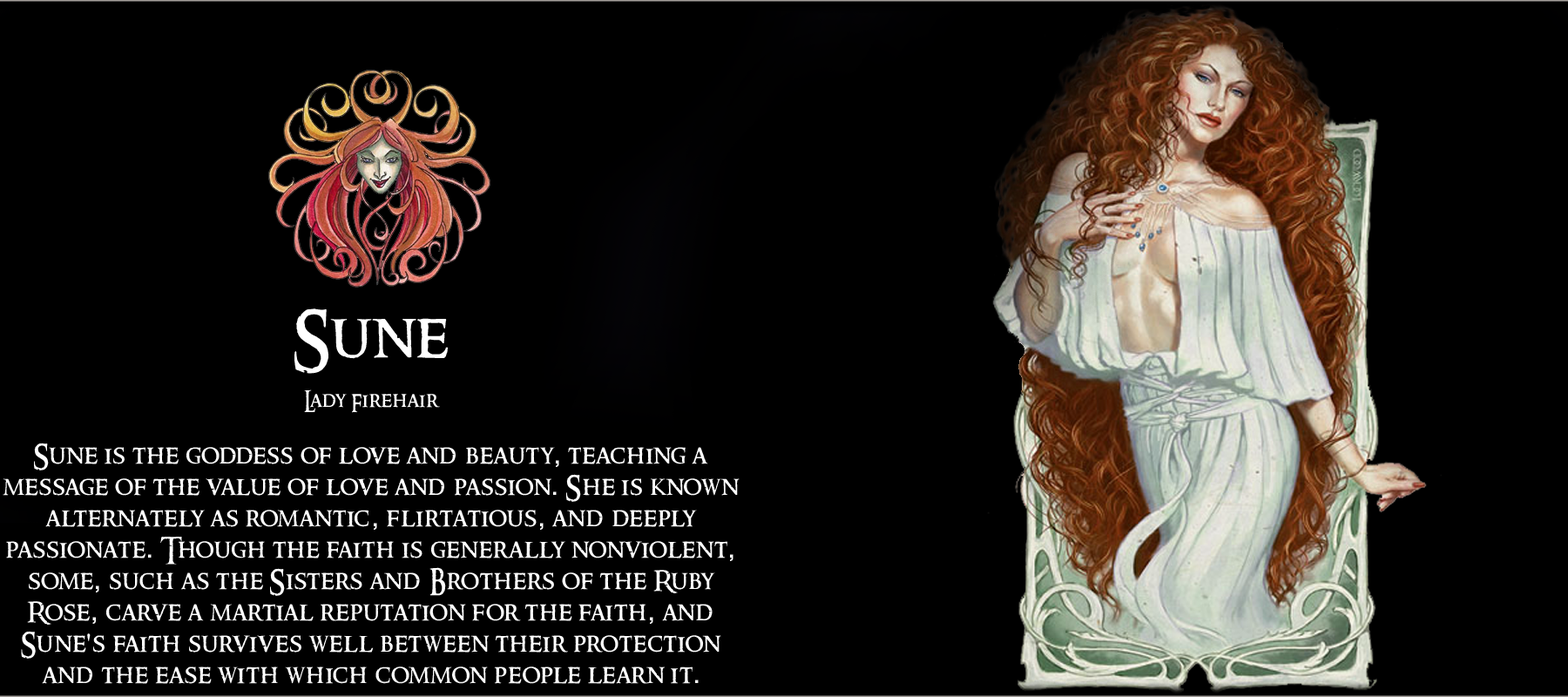
<style>
.page{position:relative;width:1568px;height:697px;background:#000000}
.page>*{position:absolute;margin:0}
.t1{font:26.1px "RingbearerMedium";letter-spacing:0.025em;color:#ffffff}
.t2{font:62.7px "RingbearerMedium";letter-spacing:0.025em;color:#ffffff}
.t3{font:20.9px "RingbearerMedium";letter-spacing:0.025em;color:#ffffff}
.t4{font:26.1px "Rockwell";letter-spacing:0.025em;color:#ffffff}
</style>
<div class="page">
<p class="t1" style="left:3px;top:308px;width:737px;height:376px;text-align:center"><span class="t2">Sune<br></span><span class="t3"><br>Lady Firehair<br><br></span>Sune is the goddess of love and beauty<span class="t4">,</span> teaching a <br>message of the value of love and passion<span class="t4">.</span> She is known alternately as romantic<span class="t4">,</span> flirtatious<span class="t4">,</span> and deeply <br>passionate<span class="t4">.</span> Though the faith is generally nonviolent<span class="t4">,</span> some<span class="t4">,</span> such as the Sisters and Brothers of the Ruby Rose<span class="t4">,</span> carve a martial reputation for the faith<span class="t4">,</span> and Sune<span class="t4">'</span>s faith survives well between their protection and the ease with which common people learn it<span class="t4">.</span></p>
</div>
